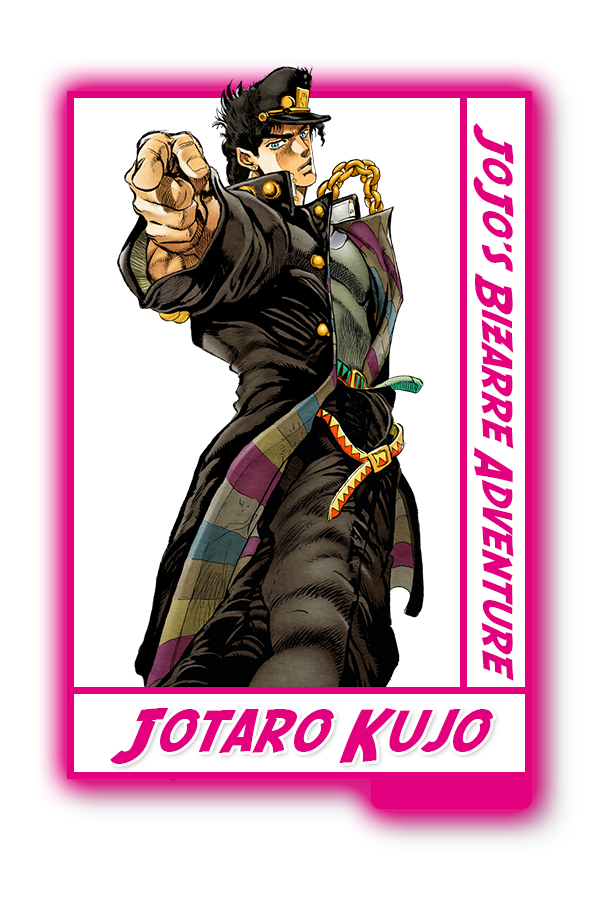
<style>
.page{position:relative;width:600px;height:900px;background:#ffffff}
.page>*{position:absolute;margin:0}
.t1{font:42.4px "SFFedora";color:#e3007e}
.t2{font:60.3px "SFFedora";color:#e3007e}
</style>
<div class="page">
<p class="t1" style="left:473px;top:123px;width:41px;height:558px;rotate:90deg">JoJo's Bizarre Adventure</p>
<p class="t2" style="left:110px;top:708px;width:384px;height:56px">Jotaro Kujo</p>
</div>
